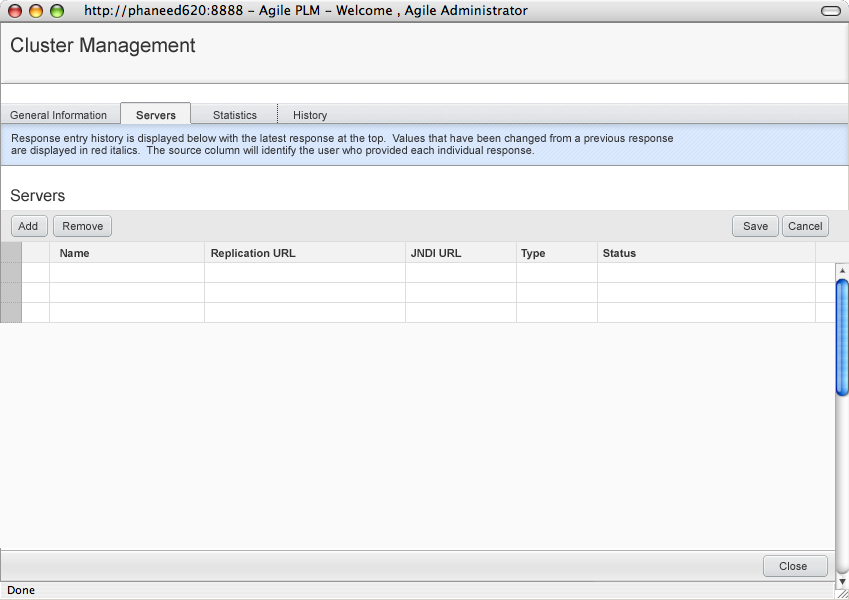
<style>
.page{position:relative;width:849px;height:600px;background:#fafafa}
.page>*{position:absolute;margin:0}
.t1{font:20px "ArialMT";color:#333333}
.t2{font:11px "ArialMT";color:#363636}
.t3{font:11px "ArialMT";color:#363636;font-weight:bold}
.t4{font:11px/12px "ArialMT";color:#333333}
.t5{font:16px "ArialMT";letter-spacing:0.005em;color:#333333}
.t6{font:11px "ArialMT";color:#333333}
.t7{font:11px "Arial-BoldMT";color:#333333}
</style>
<div class="page">
<p class="t1" style="left:11px;top:37px;width:185px;height:20px">Cluster Management</p>
<p class="t2" style="left:10px;top:111px;width:97px;height:8px">General Information</p>
<p class="t3" style="left:136px;top:111px;width:40px;height:9px">Servers</p>
<p class="t2" style="left:213px;top:111px;width:44px;height:8px">Statistics</p>
<p class="t2" style="left:294px;top:111px;width:33px;height:11px">History</p>
<p class="t4" style="left:11px;top:134px;width:662px;height:23px">Response entry history is displayed below with the latest response at the top.  Values that have been changed from a previous response<br>are displayed in red italics.  The source column will identify the user who provided each individual response.</p>
<p class="t5" style="left:10px;top:189px;width:55px;height:13px">Servers</p>
<p class="t6" style="left:18px;top:222px;width:20px;height:8px">Add</p>
<p class="t6" style="left:63px;top:222px;width:40px;height:8px">Remove</p>
<p class="t6" style="left:743px;top:222px;width:25px;height:8px">Save</p>
<p class="t6" style="left:788px;top:222px;width:34px;height:8px">Cancel</p>
<p class="t7" style="left:60px;top:249px;width:29px;height:8px">Name</p>
<p class="t7" style="left:211px;top:249px;width:85px;height:11px">Replication URL</p>
<p class="t7" style="left:411px;top:249px;width:51px;height:8px">JNDI URL</p>
<p class="t7" style="left:521px;top:249px;width:24px;height:11px">Type</p>
<p class="t7" style="left:603px;top:249px;width:33px;height:8px">Status</p>
<p class="t6" style="left:779px;top:562px;width:28px;height:8px">Close</p>
</div>
